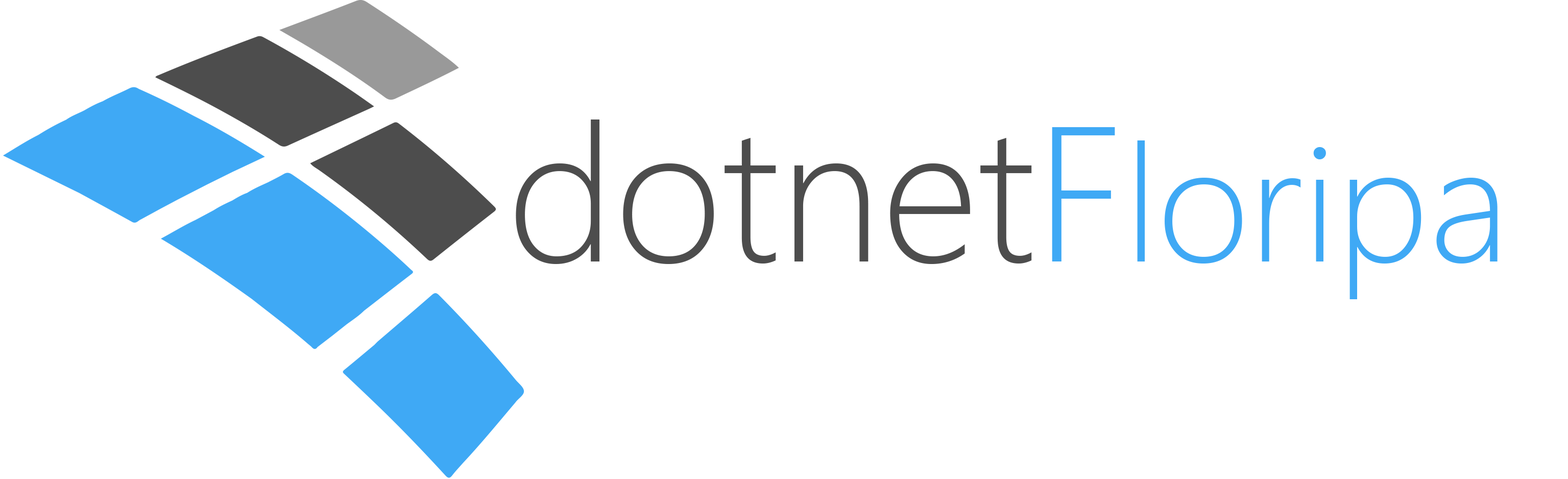
<style>
.page{position:relative;width:1568px;height:479px;background:#ffffff}
.page>*{position:absolute;margin:0}
.t1{font:191.5px "SegoeUI-Light";color:#4d4d4d}
.t2{font:191.5px "SegoeUI-Light";color:#3fa9f5}
.t3{font:163.2px "SegoeUI-Light";color:#3fa9f5}
</style>
<div class="page">
<p class="t1" style="left:516px;top:119px;width:982px;height:180px">dotnet<span class="t2">F</span><span class="t3">loripa</span></p>
</div>
